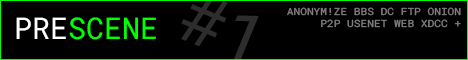
<style>
.page{position:relative;width:468px;height:60px;background:#000000}
.page>*{position:absolute;margin:0}
.t1{font:30px "RobotoMono-Regular";color:#00ff00}
.t2{font:30px "RobotoMono-Regular";color:#ffffff}
.t3{font:10px "RobotoMono-Regular";color:#808080;scale:1.12 1}
</style>
<div class="page">
<p class="t1" style="left:16px;top:17px;width:140px;height:23px"><span class="t2">PRE</span>SCENE</p>
<p class="t3" style="left:287px;top:7px;width:174px;height:21px;text-align:right">ANONYM!ZE BBS DC FTP ONION<br>P2P USENET WEB XDCC +</p>
</div>
